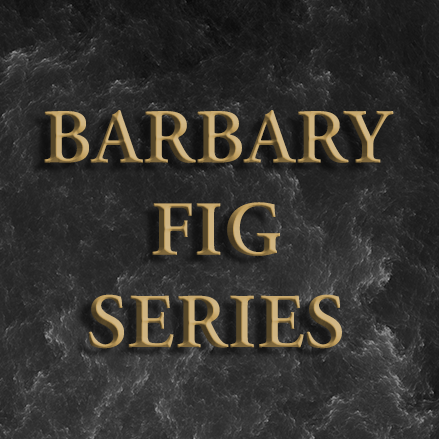
<style>
.page{position:relative;width:439px;height:439px}
.page>*{position:absolute;margin:0}
.t1{font:76.9px "AGaramondPro-Bold";letter-spacing:0.02em}
</style>
<div class="page">
<p class="t1" style="left:44px;top:110px;width:350px;height:239px;text-align:center">BARBARY<br>FIG<br>SERIES</p>
</div>
